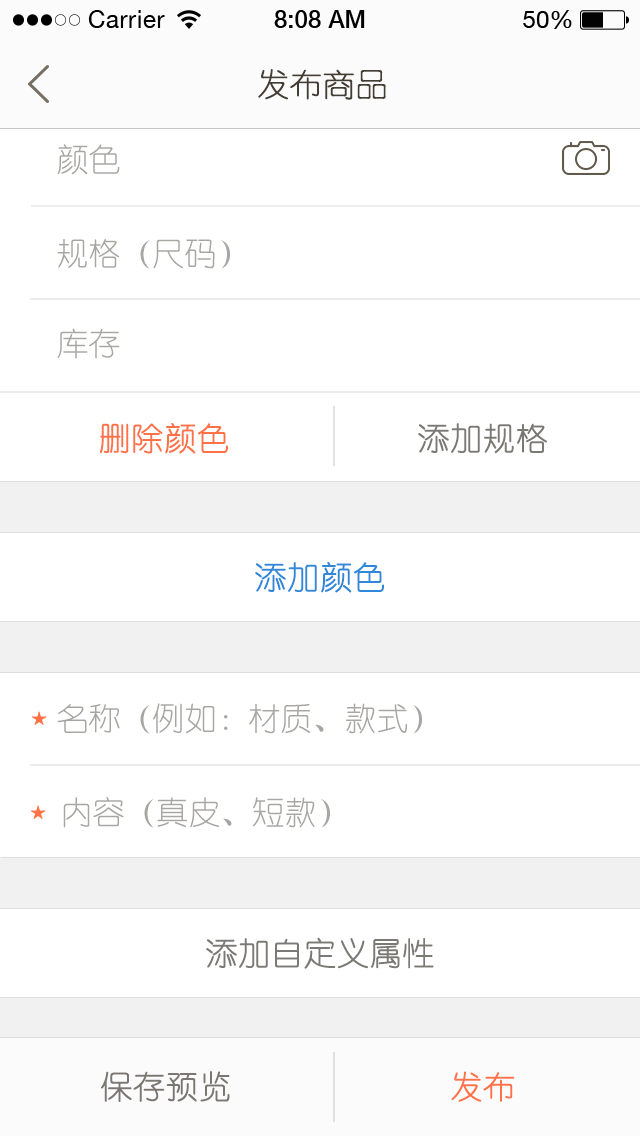
<style>
.page{position:relative;width:640px;height:1136px;background:#ffffff}
.page>*{position:absolute;margin:0}
.t1{font:32px "YouYuan";color:#433d33;text-transform:uppercase;font-weight:bold}
.t2{font:32px "YouYuan";color:#a7a6a3;text-transform:uppercase}
.t3{font:32px "YouYuan";color:#ff7248;text-transform:uppercase;font-weight:bold}
.t4{font:32px "YouYuan";color:#7b7973;text-transform:uppercase;font-weight:bold}
.t5{font:32px "YouYuan";color:#2f88da;text-transform:uppercase;font-weight:bold}
.t6{font:32px "YouYuan";color:#7a7772;text-transform:uppercase;font-weight:bold}
</style>
<div class="page">
<p class="t1" style="left:258px;top:69px;width:128px;height:31px">发布商品</p>
<p class="t2" style="left:57px;top:144px;width:63px;height:31px">颜色</p>
<p class="t2" style="left:57px;top:239px;width:173px;height:30px">规格（尺码）</p>
<p class="t2" style="left:57px;top:328px;width:63px;height:31px">库存</p>
<p class="t3" style="left:100px;top:423px;width:128px;height:31px">删除颜色</p>
<p class="t4" style="left:418px;top:423px;width:129px;height:31px">添加规格</p>
<p class="t5" style="left:255px;top:562px;width:129px;height:31px">添加颜色</p>
<p class="t2" style="left:57px;top:703px;width:365px;height:31px">名称（例如：材质、款式）</p>
<p class="t2" style="left:63px;top:797px;width:267px;height:31px">内容（真皮、短款）</p>
<p class="t4" style="left:206px;top:937px;width:228px;height:32px">添加自定义属性</p>
<p class="t6" style="left:101px;top:1071px;width:129px;height:31px">保存预览</p>
<p class="t3" style="left:451px;top:1071px;width:64px;height:31px">发布</p>
</div>
